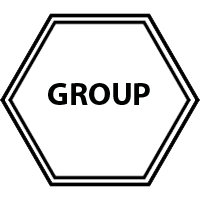
<style>
.page{position:relative;width:200px;height:200px;background:#ffffff}
.page>*{position:absolute;margin:0}
.t1{font:32px "MyriadPro-Bold";color:#000202}
</style>
<div class="page">
<p class="t1" style="left:48px;top:83px;width:102px;height:22px">GROUP</p>
</div>
